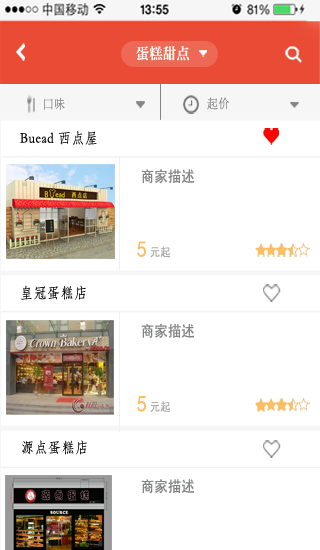
<style>
.page{position:relative;width:320px;height:550px;background:#ffffff}
.page>*{position:absolute;margin:0}
.t1{font:14.9px "CTBiaoSongSJ";letter-spacing:0.04em;color:#fdfdfc;scale:0.87 1}
.t2{font:12.6px "STSong";letter-spacing:0.04em;color:#838484;scale:0.87 1}
.t3{font:14.9px "STFangsong";letter-spacing:0.04em;color:#010101;scale:0.87 1}
.t4{font:14.9px "SimHei";letter-spacing:0.04em;color:#838484;scale:0.87 1}
.t5{font:22.9px "SimHei";letter-spacing:0.04em;color:#febe60;scale:0.87 1}
.t6{font:11.5px "SimHei";letter-spacing:0.04em;color:#a9aaaa;scale:0.87 1}
</style>
<div class="page">
<p class="t1" style="left:136px;top:46px;width:54px;height:15px">蛋糕甜点</p>
<p class="t2" style="left:44px;top:97px;width:21px;height:13px">口味</p>
<p class="t2" style="left:207px;top:97px;width:23px;height:13px">起价</p>
<p class="t3" style="left:20px;top:131px;width:77px;height:14px">Buead 西点屋</p>
<p class="t4" style="left:141px;top:169px;width:54px;height:15px">商家描述</p>
<p class="t5" style="left:137px;top:241px;width:9px;height:16px">5</p>
<p class="t6" style="left:150px;top:246px;width:21px;height:12px">元起</p>
<p class="t3" style="left:21px;top:285px;width:65px;height:15px">皇冠蛋糕店</p>
<p class="t4" style="left:141px;top:323px;width:54px;height:15px">商家描述</p>
<p class="t5" style="left:137px;top:396px;width:9px;height:16px">5</p>
<p class="t6" style="left:150px;top:401px;width:21px;height:11px">元起</p>
<p class="t3" style="left:22px;top:440px;width:65px;height:15px">源点蛋糕店</p>
<p class="t4" style="left:141px;top:479px;width:54px;height:15px">商家描述</p>
</div>
